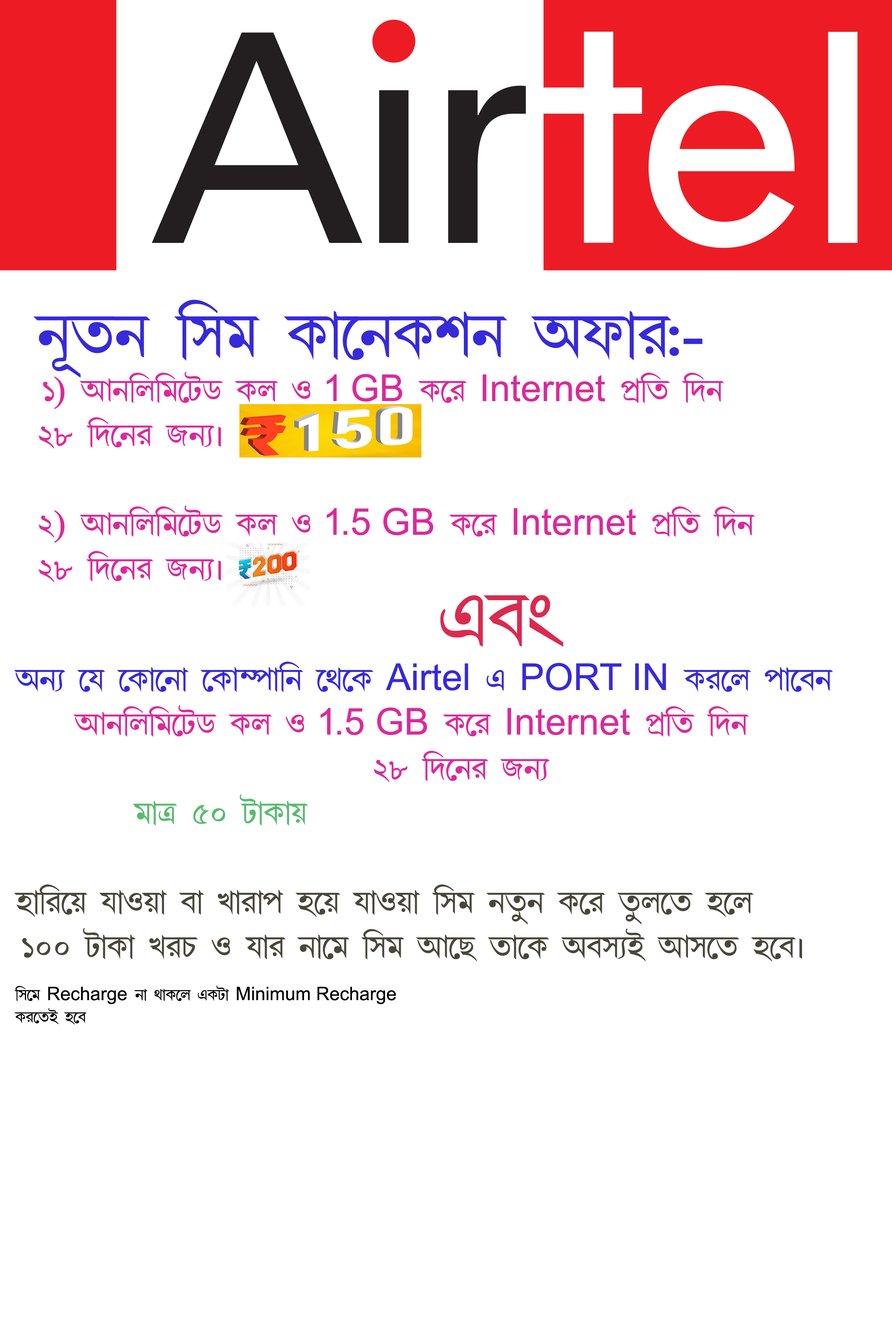
<style>
.page{position:relative;width:892px;height:1337px;background:#ffffff}
.page>*{position:absolute;margin:0}
.t1{font:37.2px "AmarBanglaNormal";color:#da2a9a}
.t2{font:74.3px "AmarBanglaNormal";color:#362ada}
.t3{font:37.2px "ArialMT";color:#da2a9a}
.t4{font:37.2px "AmarBanglaNormal";color:#49463a}
.t5{font:37.2px "AmarBanglaNormal";color:#362ada}
.t6{font:92.9px "AmarBanglaNormal";color:#da2a4f}
.t7{font:37.2px "ArialMT";color:#362ada}
.t8{font:37.2px "AmarBanglaNormal";color:#58bc6f}
.t9{font:18.6px "AmarBanglaNormal";color:#000000}
.t10{font:18.6px "ArialMT";color:#000000}
</style>
<div class="page">
<p class="t1" style="left:33px;top:300px;width:722px;height:283px"><span class="t2">e§ae ¢pj L¡­eLne Ag¡l:-<br></span>1) Be¢m¢j­VX Lm J <span class="t3">1 GB</span> L­l <span class="t3">Internet</span> fË¢a ¢ce<br>28 ¢c­el SeÉz<br><br>2) Be¢m¢j­VX Lm J <span class="t3">1.5 GB</span> L­l <span class="t3">Internet</span> fË¢a ¢ce<br>28 ¢c­el SeÉz</p>
<p class="t4" style="left:14px;top:595px;width:819px;height:430px"><span class="t5">                          </span><span class="t6"> Hhw<br></span><span class="t5">AeÉ ­k ­L¡­e¡ ­L¡Çf¡¢e ­b­L </span><span class="t7">Airtel</span><span class="t5"> H </span><span class="t7">PORT IN</span><span class="t5"> Ll­m f¡­he<br>    </span><span class="t1">Be¢m¢j­VX Lm J </span><span class="t3">1.5 GB</span><span class="t1"> L­l </span><span class="t3">Internet</span><span class="t1"> fË¢a ¢ce<br>                        28 ¢c­el SeÉ<br>        </span><span class="t8">j¡œ 50 V¡L¡u<br><br></span>q¡¢l­u k¡Ju¡ h¡ M¡l¡f q­u k¡Ju¡ ¢pj ea¥e L­l a¥m­a q­m<br>100 V¡L¡ MlQ J k¡l e¡­j ¢pj B­R a¡­L AhpÉC Bp­a q­hz<br><br><span class="t9">¢p­j </span><span class="t10">Recharge</span><span class="t9"> e¡ b¡L­m HLV¡ </span><span class="t10">Minimum Recharge</span><span class="t9"> <br>Ll­aC q­h</span></p>
</div>
